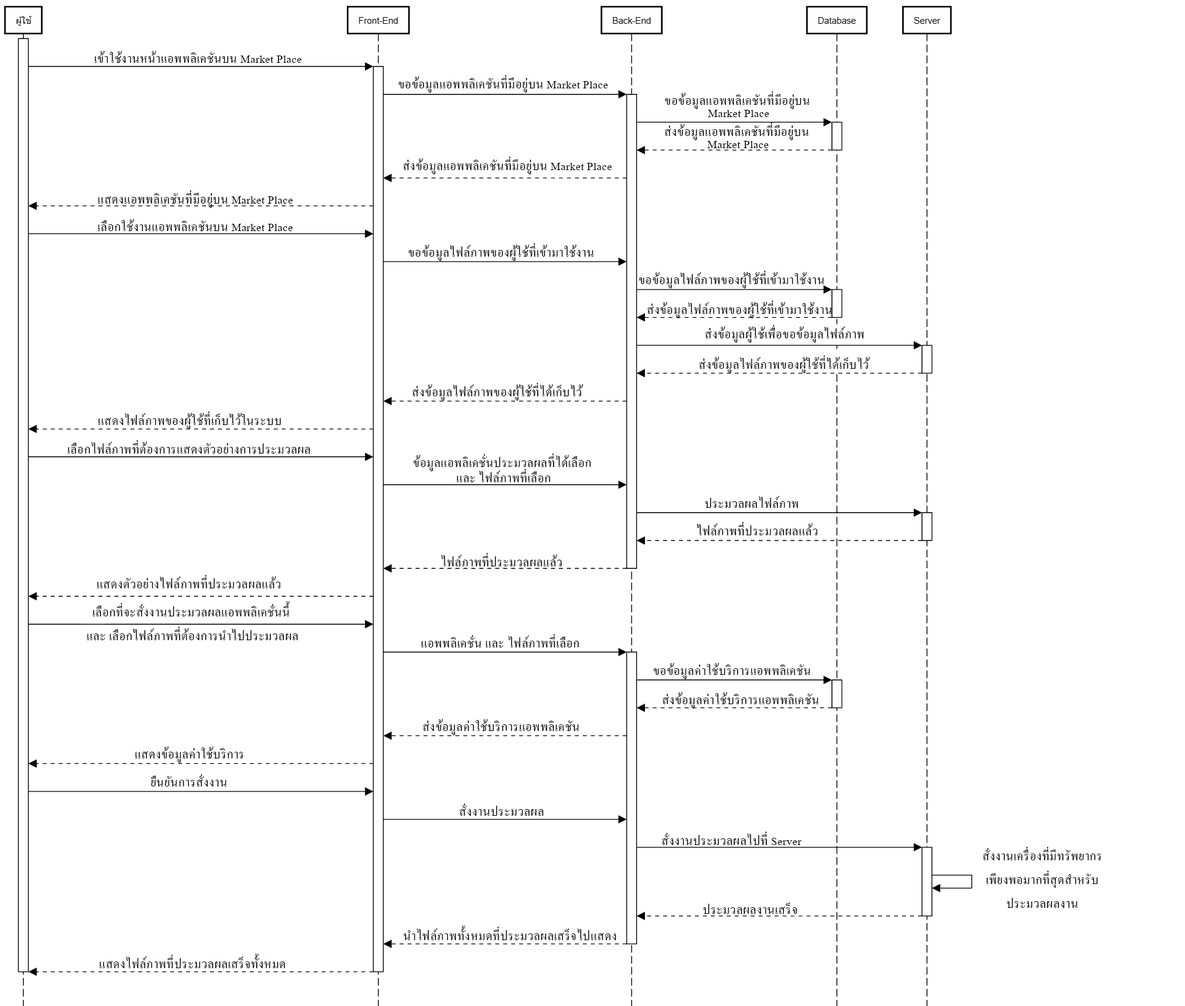
<style>
.page{position:relative;width:1185px;height:1006px;background:#ffffff}
.page>*{position:absolute;margin:0}
.t1{font:16.5px "AngsanaNew";letter-spacing:0.02em;color:#000000}
.t2{font:16.5px/12.2px "AngsanaNew";letter-spacing:0.02em;color:#000000}
.t3{font:16.5px/15.2px "AngsanaNew";letter-spacing:0.02em;color:#000000}
.t4{font:16.5px/23.8px "AngsanaNew";letter-spacing:0.02em;color:#000000}
</style>
<div class="page">
<p class="t1" style="left:95px;top:51px;width:207px;height:12px">เข้าใช้งานหน้าแอพพลิเคชันบน Market Place</p>
<p class="t1" style="left:398px;top:75px;width:210px;height:18px">ขอข้อมูลแอพพลิเคชันที่มีอยู่บน Market Place</p>
<p class="t2" style="left:665px;top:91px;width:145px;height:26px;text-align:center">ขอข้อมูลแอพพลิเคชันที่มีอยู่บน <br>Market Place</p>
<p class="t2" style="left:665px;top:123px;width:143px;height:25px;text-align:center">ส่งข้อมูลแอพพลิเคชันที่มีอยู่บน <br>Market Place</p>
<p class="t1" style="left:403px;top:157px;width:209px;height:17px">ส่งข้อมูลแอพพลิเคชันที่มีอยู่บน Market Place</p>
<p class="t1" style="left:98px;top:190px;width:195px;height:18px">แสดงแอพพลิเคชันที่มีอยู่บน Market Place</p>
<p class="t1" style="left:98px;top:219px;width:195px;height:12px">เลือกใช้งานแอพพลิเคชันบน Market Place</p>
<p class="t1" style="left:409px;top:243px;width:185px;height:18px">ขอข้อมูลไฟล์ภาพของผู้ใช้ที่เข้ามาใช้งาน</p>
<p class="t1" style="left:639px;top:271px;width:185px;height:17px">ขอข้อมูลไฟล์ภาพของผู้ใช้ที่เข้ามาใช้งาน</p>
<p class="t1" style="left:648px;top:301px;width:184px;height:17px">ส่งข้อมูลไฟล์ภาพของผู้ใช้ที่เข้ามาใช้งาน</p>
<p class="t1" style="left:705px;top:325px;width:159px;height:18px">ส่งข้อมูลผู้ใช้เพื่อขอข้อมูลไฟล์ภาพ</p>
<p class="t1" style="left:699px;top:355px;width:171px;height:18px">ส่งข้อมูลไฟล์ภาพของผู้ใช้ที่ได้เก็บไว้</p>
<p class="t1" style="left:412px;top:383px;width:171px;height:18px">ส่งข้อมูลไฟล์ภาพของผู้ใช้ที่ได้เก็บไว้</p>
<p class="t1" style="left:98px;top:412px;width:183px;height:17px">แสดงไฟล์ภาพของผู้ใช้ที่เก็บไว้ในระบบ</p>
<p class="t1" style="left:68px;top:440px;width:242px;height:14px">เลือกไฟล์ภาพที่ต้องการแสดงตัวอย่างการประมวลผล</p>
<p class="t3" style="left:413px;top:454px;width:178px;height:28px;text-align:center">ข้อมูลแอพลิเคชั่นประมวลผลที่ได้เลือก <br>และ ไฟล์ภาพที่เลือก</p>
<p class="t1" style="left:705px;top:496px;width:93px;height:12px">ประมวลผลไฟล์ภาพ</p>
<p class="t1" style="left:697px;top:522px;width:121px;height:13px">ไฟล์ภาพที่ประมวลผลแล้ว</p>
<p class="t1" style="left:441px;top:553px;width:121px;height:13px">ไฟล์ภาพที่ประมวลผลแล้ว</p>
<p class="t1" style="left:97px;top:575px;width:183px;height:13px">แสดงตัวอย่างไฟล์ภาพที่ประมวลผลแล้ว</p>
<p class="t4" style="left:87px;top:601px;width:211px;height:39px;text-align:center">เลือกที่จะสั่งงานประมวลผลแอพพลิเคชั่นนี้ <br>และ เลือกไฟล์ภาพที่ต้องการนำไปประมวลผล</p>
<p class="t1" style="left:421px;top:634px;width:158px;height:14px">แอพพลิเคชั่น และ ไฟล์ภาพที่เลือก</p>
<p class="t1" style="left:654px;top:663px;width:156px;height:16px">ขอข้อมูลค่าใช้บริการแอพพลิเคชัน</p>
<p class="t1" style="left:663px;top:692px;width:156px;height:16px">ส่งข้อมูลค่าใช้บริการแอพพลิเคชัน</p>
<p class="t1" style="left:423px;top:719px;width:156px;height:16px">ส่งข้อมูลค่าใช้บริการแอพพลิเคชัน</p>
<p class="t1" style="left:135px;top:746px;width:109px;height:17px">แสดงข้อมูลค่าใช้บริการ</p>
<p class="t1" style="left:151px;top:774px;width:76px;height:13px">ยืนยันการสั่งงาน</p>
<p class="t1" style="left:460px;top:804px;width:84px;height:12px">สั่งงานประมวลผล</p>
<p class="t1" style="left:662px;top:832px;width:140px;height:13px">สั่งงานประมวลผลไปที่ Server</p>
<p class="t4" style="left:983px;top:847px;width:119px;height:61px;text-align:center">สั่งงานเครื่องที่มีทรัพยากร<br>เพียงพอมากที่สุดสำหรับ<br>ประมวลผลงาน</p>
<p class="t1" style="left:703px;top:902px;width:95px;height:12px">ประมวลผลงานเสร็จ</p>
<p class="t1" style="left:404px;top:926px;width:212px;height:14px">นำไฟล์ภาพทั้งหมดที่ประมวลผลเสร็จไปแสดง</p>
<p class="t1" style="left:99px;top:954px;width:186px;height:14px">แสดงไฟล์ภาพที่ประมวลผลเสร็จทั้งหมด</p>
</div>
